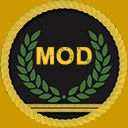
<style>
.page{position:relative;width:128px;height:128px;background:#cc9900}
.page>*{position:absolute;margin:0}
.t1{font:24px "Arial-BoldMT";color:#ffcc33;font-weight:bold}
</style>
<div class="page">
<p class="t1" style="left:36px;top:47px;width:56px;height:18px">MOD</p>
</div>
